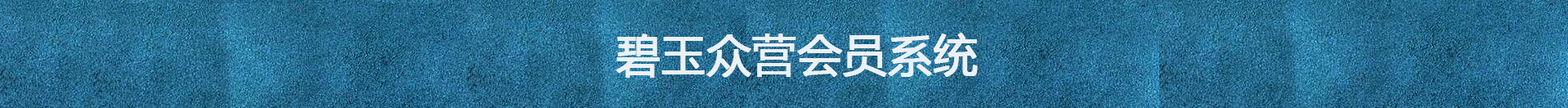
<style>
.page{position:relative;width:1568px;height:108px}
.page>*{position:absolute;margin:0}
.t1{font:44.1px "MicrosoftYaHei";color:#eaf1f6;text-transform:uppercase;font-weight:bold}
</style>
<div class="page">
<p class="t1" style="left:616px;top:33px;width:362px;height:45px">碧玉众营会员系统</p>
</div>
